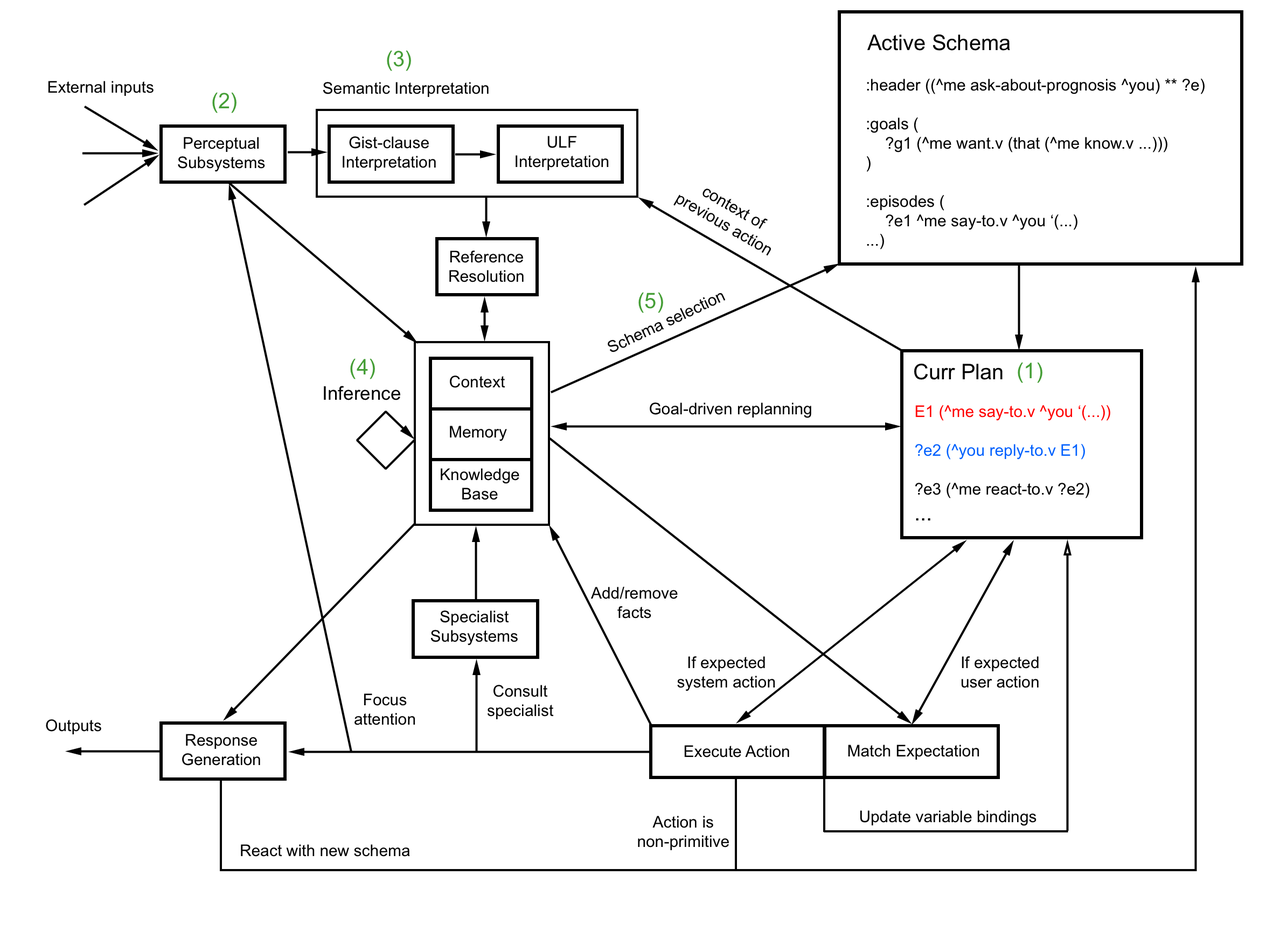
<style>
.page{position:relative;width:1280px;height:931px;background:#ffffff}
.page>*{position:absolute;margin:0}
.t1{font:21.6px "ArialMT";color:#000000}
.t2{font:21.6px "ArialMT";color:#459e36}
.t3{font:16.2px "ArialMT";color:#000000}
.t4{font:18.9px "ArialMT";color:#000000}
.t5{font:16.2px "ArialMT";color:#ff0000}
.t6{font:16.2px "ArialMT";color:#0060fe}
</style>
<div class="page">
<p class="t1" style="left:868px;top:34px;width:142px;height:17px">Active Schema</p>
<p class="t2" style="left:387px;top:50px;width:24px;height:21px">(3)</p>
<p class="t3" style="left:48px;top:81px;width:106px;height:15px">External inputs</p>
<p class="t3" style="left:323px;top:82px;width:166px;height:15px">Semantic Interpretation</p>
<p class="t3" style="left:867px;top:79px;width:338px;height:171px">:header ((^me ask-about-prognosis ^you) ** ?e)<br><br>:goals (<br> ?g1 (^me want.v (that (^me know.v ...)))<br>)<br><br>:episodes (<br> ?e1 ^me say-to.v ^you ‘(...)<br>...)</p>
<p class="t2" style="left:212px;top:92px;width:25px;height:21px">(2)</p>
<p class="t3" style="left:178px;top:137px;width:87px;height:35px;text-align:center">Perceptual<br>Subsystems</p>
<p class="t3" style="left:343px;top:136px;width:93px;height:35px;text-align:center">Gist-clause<br>Interpretation</p>
<p class="t3" style="left:516px;top:136px;width:93px;height:34px;text-align:center">ULF<br>Interpretation</p>
<p class="t3" style="left:674px;top:189px;width:97px;height:67px;text-align:center;rotate:30deg">context of<br>previous action</p>
<p class="t3" style="left:449px;top:251px;width:75px;height:31px;text-align:center">Reference<br>Resolution</p>
<p class="t3" style="left:608px;top:293px;width:118px;height:59px;rotate:-25deg">Schema selection</p>
<p class="t2" style="left:639px;top:292px;width:24px;height:21px">(5)</p>
<p class="t2" style="left:350px;top:358px;width:25px;height:21px">(4)</p>
<p class="t1" style="left:915px;top:363px;width:88px;height:17px">Curr Plan</p>
<p class="t2" style="left:1018px;top:362px;width:25px;height:21px">(1)</p>
<p class="t3" style="left:450px;top:376px;width:56px;height:12px">Context</p>
<p class="t4" style="left:324px;top:386px;width:76px;height:14px">Inference</p>
<p class="t3" style="left:650px;top:403px;width:162px;height:15px">Goal-driven replanning</p>
<p class="t5" style="left:915px;top:405px;width:196px;height:116px">E1 (^me say-to.v ^you ‘(...))<br><br><span class="t6">?e2 (^you reply-to.v E1)<br></span><span class="t3"><br>?e3 (^me react-to.v ?e2)<br></span><span class="t1">...</span></p>
<p class="t3" style="left:450px;top:426px;width:57px;height:15px">Memory</p>
<p class="t3" style="left:441px;top:468px;width:79px;height:32px;text-align:center">Knowledge<br>Base</p>
<p class="t3" style="left:591px;top:587px;width:87px;height:32px;text-align:center">Add/remove<br>facts</p>
<p class="t3" style="left:431px;top:611px;width:87px;height:35px;text-align:center">Specialist<br>Subsystems</p>
<p class="t3" style="left:677px;top:656px;width:99px;height:35px;text-align:center">If expected<br>system action</p>
<p class="t3" style="left:961px;top:656px;width:78px;height:32px;text-align:center">If expected<br>user action</p>
<p class="t3" style="left:488px;top:685px;width:66px;height:34px;text-align:center">Consult<br>specialist</p>
<p class="t3" style="left:355px;top:694px;width:61px;height:31px;text-align:center">Focus<br>attention</p>
<p class="t3" style="left:46px;top:719px;width:55px;height:16px">Outputs</p>
<p class="t3" style="left:182px;top:734px;width:78px;height:32px;text-align:center">Response<br>Generation</p>
<p class="t3" style="left:684px;top:745px;width:106px;height:13px">Execute Action</p>
<p class="t3" style="left:848px;top:745px;width:132px;height:15px">Match Expectation</p>
<p class="t3" style="left:638px;top:816px;width:91px;height:34px;text-align:center">Action is non-primitive</p>
<p class="t3" style="left:860px;top:811px;width:177px;height:15px">Update variable bindings</p>
<p class="t3" style="left:241px;top:844px;width:169px;height:13px">React with new schema</p>
</div>
